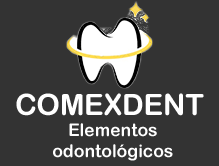
<style>
.page{position:relative;width:219px;height:166px;background:#333333}
.page>*{position:absolute;margin:0}
.t1{font:29.4px "ArialRoundedMTBold";color:#ffffff}
.t2{font:17.5px "ArialRoundedMTBold";color:#ffffff}
</style>
<div class="page">
<p class="t1" style="left:16px;top:93px;width:188px;height:23px">COMEXDENT</p>
<p class="t2" style="left:53px;top:123px;width:120px;height:38px;text-align:center">Elementos<br>odontológicos</p>
</div>
